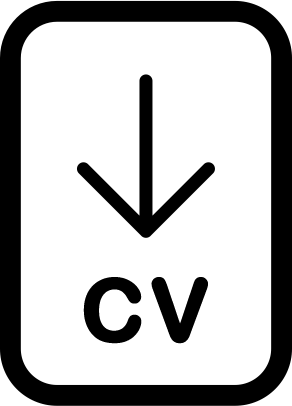
<style>
.page{position:relative;width:292px;height:406px;background:#ffffff}
.page>*{position:absolute;margin:0}
.t1{font:86px "ArialRoundedMTBold";letter-spacing:0.04em;color:#000000;font-weight:bold}
</style>
<div class="page">
<p class="t1" style="left:83px;top:277px;width:125px;height:67px">CV</p>
</div>
